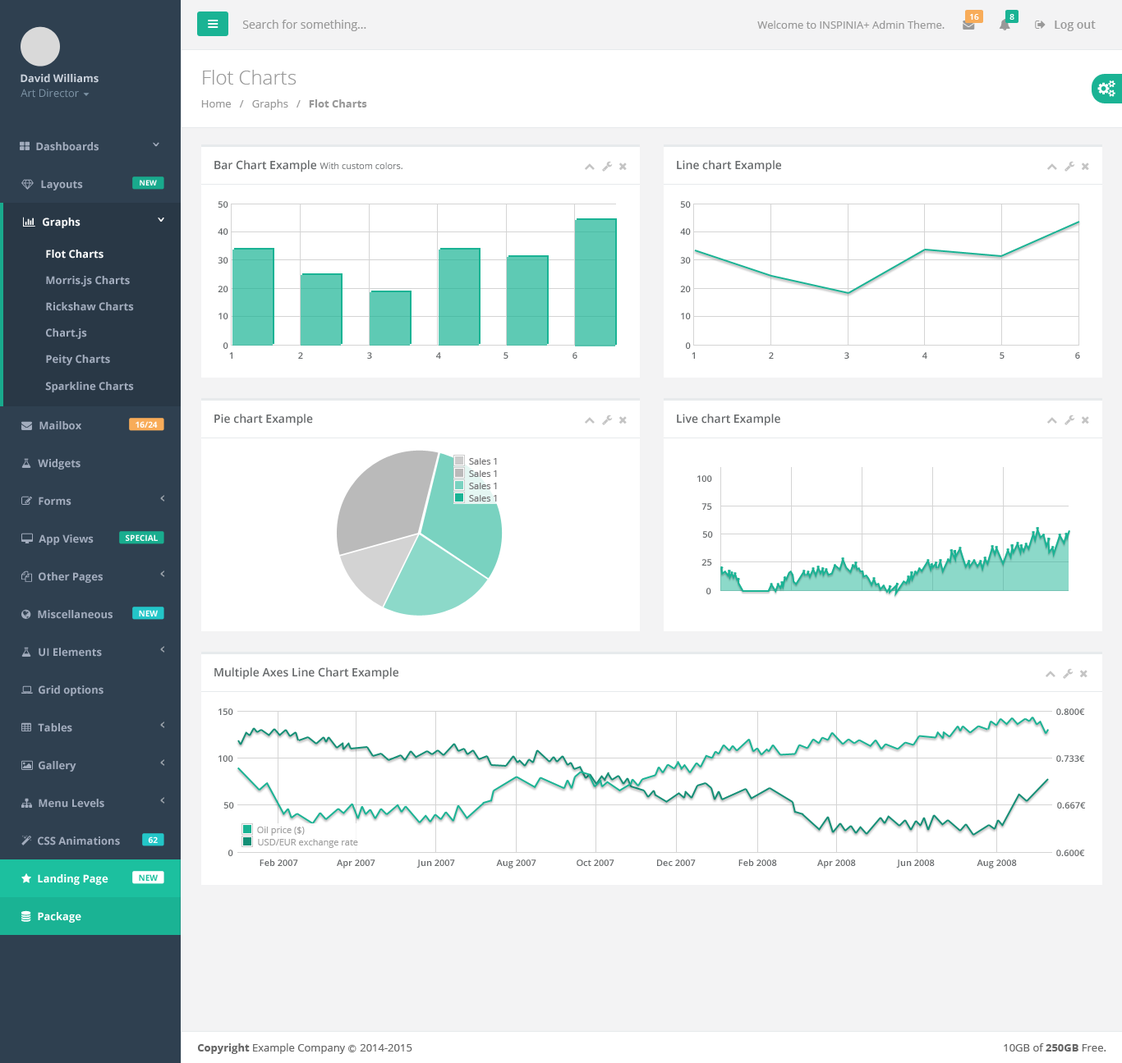
<style>
.page{position:relative;width:1122px;height:1063px;background:#ffffff}
.page>*{position:absolute;margin:0}
.t1{font:8.2px "OpenSans-Semibold";color:#ffffff}
.t2{font:11.5px "OpenSans";color:#999999}
.t3{font:10.7px "OpenSans";color:#999999}
.t4{font:11.5px "OpenSans-Semibold";color:#999999}
.t5{font:10.7px "OpenSans-Bold";color:#cad1db}
.t6{font:19.7px "OpenSans-Light";color:#999999}
.t7{font:10.7px "OpenSans";color:#7d93a5}
.t8{font:10.7px "OpenSans-Bold";color:#999999}
.t9{font:10.7px "OpenSans-Bold";color:#a2acbd}
.t10{font:9px "OpenSans";color:#676a6c}
.t11{font:11.5px "OpenSans-Semibold";color:#676a6c}
.t12{font:7.4px "OpenSans-Bold";color:#fefefe}
.t13{font:9px "OpenSans-Semibold";color:#676a6c}
.t14{font:10.7px "OpenSans-Bold";color:#ffffff}
.t15{font:8.2px "OpenSans-Bold";color:#fefefe}
.t16{font:9px "OpenSans";color:#727173}
.t17{font:9px "OpenSans";color:#a1a1a1}
.t18{font:8.2px "OpenSans-Bold";color:#1cc09f}
.t19{font:10.7px "OpenSans";color:#666666}
.t20{font:10.7px "OpenSans-Bold";color:#666666}
.t21{font:8.2px "Meiryo";color:#666666}
</style>
<div class="page">
<p class="t1" style="left:970px;top:14px;width:9px;height:6px">16</p>
<p class="t1" style="left:1009px;top:14px;width:5px;height:6px">8</p>
<p class="t2" style="left:242px;top:20px;width:124px;height:11px">Search for something...</p>
<p class="t3" style="left:757px;top:21px;width:187px;height:8px">Welcome to INSPINIA+ Admin Theme.</p>
<p class="t4" style="left:1054px;top:21px;width:41px;height:10px">Log out</p>
<p class="t5" style="left:21px;top:74px;width:78px;height:9px">David Williams</p>
<p class="t6" style="left:203px;top:70px;width:93px;height:15px">Flot Charts</p>
<p class="t7" style="left:21px;top:89px;width:58px;height:9px">Art Director</p>
<p class="t3" style="left:201px;top:99px;width:166px;height:11px">Home   /   Graphs   /   <span class="t8">Flot Charts</span></p>
<p class="t9" style="left:36px;top:142px;width:63px;height:9px">Dashboards</p>
<p class="t10" style="left:214px;top:160px;width:188px;height:12px"><span class="t11">Bar Chart Example </span>With custom colors.</p>
<p class="t11" style="left:677px;top:160px;width:104px;height:12px">Line chart Example</p>
<p class="t9" style="left:41px;top:180px;width:42px;height:10px">Layouts</p>
<p class="t12" style="left:140px;top:180px;width:17px;height:6px">NEW</p>
<p class="t13" style="left:218px;top:201px;width:10px;height:7px">50</p>
<p class="t13" style="left:680px;top:201px;width:10px;height:7px">50</p>
<p class="t14" style="left:43px;top:218px;width:37px;height:10px">Graphs</p>
<p class="t13" style="left:218px;top:228px;width:10px;height:7px">40</p>
<p class="t13" style="left:680px;top:228px;width:10px;height:7px">40</p>
<p class="t14" style="left:46px;top:250px;width:57px;height:9px">Flot Charts</p>
<p class="t13" style="left:218px;top:257px;width:10px;height:7px">30</p>
<p class="t13" style="left:680px;top:257px;width:10px;height:7px">30</p>
<p class="t9" style="left:46px;top:276px;width:84px;height:11px">Morris.js Charts</p>
<p class="t13" style="left:218px;top:286px;width:10px;height:6px">20</p>
<p class="t13" style="left:680px;top:286px;width:10px;height:6px">20</p>
<p class="t9" style="left:46px;top:302px;width:88px;height:9px">Rickshaw Charts</p>
<p class="t13" style="left:218px;top:313px;width:10px;height:6px">10</p>
<p class="t13" style="left:681px;top:313px;width:9px;height:6px">10</p>
<p class="t9" style="left:46px;top:328px;width:41px;height:11px">Chart.js</p>
<p class="t13" style="left:223px;top:342px;width:5px;height:7px">0</p>
<p class="t13" style="left:229px;top:352px;width:3px;height:7px">1</p>
<p class="t13" style="left:298px;top:352px;width:5px;height:7px">2</p>
<p class="t13" style="left:367px;top:352px;width:5px;height:7px">3</p>
<p class="t13" style="left:436px;top:352px;width:5px;height:7px">4</p>
<p class="t13" style="left:503px;top:352px;width:5px;height:7px">5</p>
<p class="t13" style="left:572px;top:352px;width:5px;height:7px">6</p>
<p class="t13" style="left:686px;top:342px;width:4px;height:7px">0</p>
<p class="t13" style="left:691px;top:352px;width:4px;height:7px">1</p>
<p class="t13" style="left:768px;top:352px;width:5px;height:7px">2</p>
<p class="t13" style="left:844px;top:352px;width:5px;height:7px">3</p>
<p class="t13" style="left:922px;top:352px;width:5px;height:7px">4</p>
<p class="t13" style="left:999px;top:352px;width:5px;height:7px">5</p>
<p class="t13" style="left:1075px;top:352px;width:5px;height:7px">6</p>
<p class="t9" style="left:46px;top:355px;width:64px;height:10px">Peity Charts</p>
<p class="t9" style="left:45px;top:382px;width:89px;height:10px">Sparkline Charts</p>
<p class="t11" style="left:214px;top:414px;width:99px;height:12px">Pie chart Example</p>
<p class="t11" style="left:677px;top:414px;width:103px;height:12px">Live chart Example</p>
<p class="t9" style="left:39px;top:421px;width:42px;height:9px">Mailbox</p>
<p class="t15" style="left:135px;top:421px;width:23px;height:7px">16/24</p>
<p class="t9" style="left:38px;top:459px;width:42px;height:11px">Widgets</p>
<p class="t16" style="left:469px;top:458px;width:28px;height:7px">Sales 1</p>
<p class="t16" style="left:469px;top:470px;width:28px;height:7px">Sales 1</p>
<p class="t16" style="left:469px;top:483px;width:28px;height:6px">Sales 1</p>
<p class="t13" style="left:697px;top:475px;width:15px;height:7px">100</p>
<p class="t9" style="left:39px;top:497px;width:32px;height:9px">Forms</p>
<p class="t16" style="left:469px;top:495px;width:28px;height:7px">Sales 1</p>
<p class="t13" style="left:701px;top:503px;width:11px;height:7px">75</p>
<p class="t13" style="left:702px;top:531px;width:11px;height:7px">50</p>
<p class="t9" style="left:39px;top:534px;width:55px;height:11px">App Views</p>
<p class="t15" style="left:126px;top:534px;width:32px;height:7px">SPECIAL</p>
<p class="t13" style="left:701px;top:559px;width:11px;height:7px">25</p>
<p class="t9" style="left:39px;top:572px;width:64px;height:11px">Other Pages</p>
<p class="t13" style="left:706px;top:588px;width:5px;height:6px">0</p>
<p class="t9" style="left:38px;top:610px;width:74px;height:9px">Miscellaneous</p>
<p class="t15" style="left:139px;top:610px;width:19px;height:7px">NEW</p>
<p class="t9" style="left:39px;top:648px;width:63px;height:9px">UI Elements</p>
<p class="t11" style="left:214px;top:667px;width:184px;height:13px">Multiple Axes Line Chart Example</p>
<p class="t9" style="left:39px;top:686px;width:64px;height:10px">Grid options</p>
<p class="t13" style="left:218px;top:709px;width:15px;height:6px">150</p>
<p class="t13" style="left:1056px;top:709px;width:29px;height:6px">0.800€</p>
<p class="t9" style="left:38px;top:723px;width:34px;height:9px">Tables</p>
<p class="t9" style="left:39px;top:761px;width:37px;height:11px">Gallery</p>
<p class="t13" style="left:218px;top:755px;width:15px;height:7px">100</p>
<p class="t13" style="left:1056px;top:755px;width:29px;height:7px">0.733€</p>
<p class="t9" style="left:39px;top:799px;width:65px;height:9px">Menu Levels</p>
<p class="t13" style="left:223px;top:802px;width:11px;height:7px">50</p>
<p class="t13" style="left:1057px;top:802px;width:28px;height:7px">0.667€</p>
<p class="t17" style="left:257px;top:827px;width:48px;height:9px">Oil price ($)</p>
<p class="t9" style="left:38px;top:837px;width:82px;height:9px">CSS Animations</p>
<p class="t15" style="left:148px;top:837px;width:10px;height:6px">62</p>
<p class="t17" style="left:258px;top:839px;width:100px;height:9px">USD/EUR exchange rate</p>
<p class="t13" style="left:228px;top:850px;width:5px;height:6px">0</p>
<p class="t13" style="left:1056px;top:850px;width:29px;height:6px">0.600€</p>
<p class="t13" style="left:259px;top:859px;width:39px;height:7px">Feb 2007</p>
<p class="t13" style="left:337px;top:860px;width:38px;height:9px">Apr 2007</p>
<p class="t13" style="left:416px;top:860px;width:39px;height:8px">Jun 2007</p>
<p class="t13" style="left:496px;top:860px;width:40px;height:9px">Aug 2007</p>
<p class="t13" style="left:576px;top:860px;width:38px;height:6px">Oct 2007</p>
<p class="t13" style="left:657px;top:860px;width:38px;height:6px">Dec 2007</p>
<p class="t13" style="left:738px;top:859px;width:39px;height:7px">Feb 2008</p>
<p class="t13" style="left:817px;top:860px;width:39px;height:9px">Apr 2008</p>
<p class="t13" style="left:896px;top:860px;width:38px;height:8px">Jun 2008</p>
<p class="t13" style="left:976px;top:860px;width:40px;height:9px">Aug 2008</p>
<p class="t14" style="left:38px;top:874px;width:70px;height:11px">Landing Page</p>
<p class="t18" style="left:139px;top:874px;width:19px;height:7px">NEW</p>
<p class="t14" style="left:38px;top:912px;width:43px;height:11px">Package</p>
<p class="t19" style="left:197px;top:1044px;width:215px;height:10px"><span class="t20">Copyright</span> Example Company <span class="t21">Ⓒ </span>2014-2015</p>
<p class="t19" style="left:1003px;top:1044px;width:103px;height:8px">10GB of <span class="t20">250GB</span> Free.</p>
</div>
